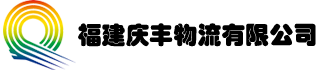
<style>
.page{position:relative;width:318px;height:70px;background:#ffffff}
.page>*{position:absolute;margin:0}
.t1{font:24px "STHupo";color:#000000}
</style>
<div class="page">
<p class="t1" style="left:78px;top:23px;width:238px;height:24px">福建庆丰物流有限公司</p>
</div>
